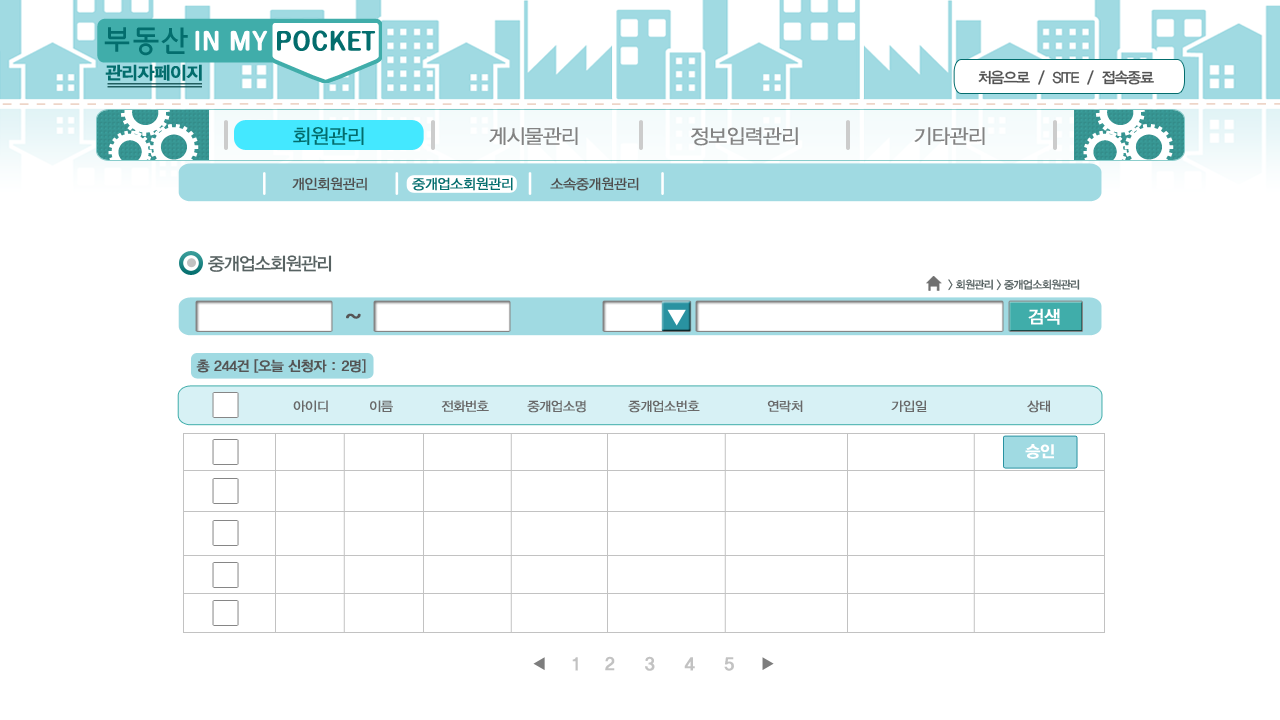
<style>
.page{position:relative;width:1280px;height:720px;background:#ffffff}
.page>*{position:absolute;margin:0}
.t1{font:17.8px "YDIYGO340";letter-spacing:-0.04em;color:#036d6d;font-weight:bold}
.t2{font:15px "YDIYGO330";letter-spacing:-0.06em;color:#535353}
.t3{font:20px "YDIYGO320";letter-spacing:-0.04em;color:#036d6d;font-weight:bold}
.t4{font:20px "YDIYGO320";letter-spacing:-0.04em;color:#838383;font-weight:bold}
.t5{font:14px "YDIYGO320";letter-spacing:-0.04em;color:#4f4f4f;font-weight:bold}
.t6{font:14px "YDIYGO320";letter-spacing:-0.04em;color:#036d6d;font-weight:bold}
.t7{font:18px "YDIYGO330";letter-spacing:-0.06em;color:#576262}
.t8{font:11px "YDIYGO330";letter-spacing:-0.06em;color:#576262}
.t9{font:23.8px "FBsky-Medium--KSCpc-EUC-H";letter-spacing:-0.04em;color:#555555;font-weight:bold}
.t10{font:17.8px "YDIYGO330";letter-spacing:-0.04em;color:#ffffff;font-weight:bold}
.t11{font:13.8px "YDIYGO330";letter-spacing:-0.04em;color:#555555;font-weight:bold}
.t12{font:13px "YDIYGO320";letter-spacing:-0.04em;color:#696969;font-weight:bold}
.t13{font:16px "YDIYGO340";letter-spacing:-0.04em;color:#ffffff;font-weight:bold}
.t14{font:17.8px "YDIYGO340";letter-spacing:-0.04em;color:#c2c2c2;font-weight:bold}
</style>
<div class="page">
<p class="t1" style="left:105px;top:64px;width:97px;height:17px">관리자페이지</p>
<p class="t2" style="left:978px;top:70px;width:176px;height:15px">처음으로  /  SITE  /  접속종료</p>
<p class="t3" style="left:293px;top:127px;width:71px;height:18px">회원관리</p>
<p class="t4" style="left:489px;top:127px;width:89px;height:18px">게시물관리</p>
<p class="t4" style="left:691px;top:127px;width:107px;height:19px">정보입력관리</p>
<p class="t4" style="left:914px;top:127px;width:71px;height:18px">기타관리</p>
<p class="t5" style="left:292px;top:177px;width:75px;height:14px">개인회원관리</p>
<p class="t6" style="left:412px;top:177px;width:101px;height:14px">중개업소회원관리</p>
<p class="t5" style="left:550px;top:177px;width:89px;height:14px">소속중개원관리</p>
<p class="t7" style="left:208px;top:255px;width:124px;height:17px">중개업소회원관리</p>
<p class="t8" style="left:948px;top:279px;width:132px;height:12px">&gt; 회원관리 &gt; 중개업소회원관리</p>
<p class="t9" style="left:346px;top:313px;width:15px;height:6px">~</p>
<p class="t10" style="left:1028px;top:308px;width:32px;height:17px">검색</p>
<p class="t11" style="left:196px;top:359px;width:170px;height:14px">총 244건 [오늘 신청자 : 2명]</p>
<p class="t12" style="left:293px;top:400px;width:35px;height:12px">아이디</p>
<p class="t12" style="left:370px;top:400px;width:23px;height:12px">이름</p>
<p class="t12" style="left:441px;top:400px;width:48px;height:12px">전화번호</p>
<p class="t12" style="left:527px;top:400px;width:59px;height:13px">중개업소명</p>
<p class="t12" style="left:628px;top:400px;width:72px;height:13px">중개업소번호</p>
<p class="t12" style="left:767px;top:400px;width:36px;height:12px">연락처</p>
<p class="t12" style="left:891px;top:400px;width:36px;height:12px">가입일</p>
<p class="t12" style="left:1027px;top:400px;width:23px;height:13px">상태</p>
<p class="t13" style="left:1025px;top:444px;width:29px;height:15px">승인</p>
<p class="t14" style="left:572px;top:656px;width:162px;height:15px">1    2     3     4     5</p>
</div>
